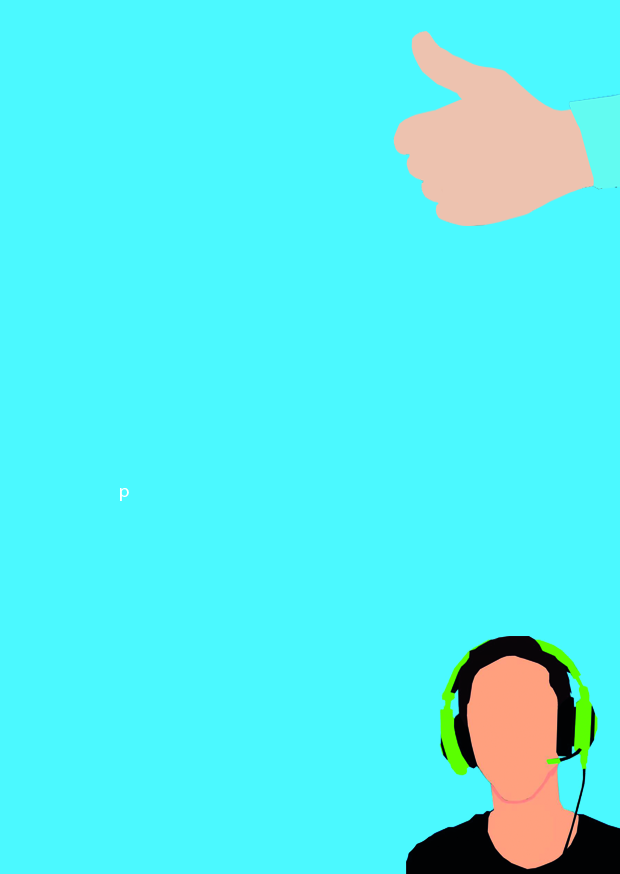
<style>
.page{position:relative;width:620px;height:874px;background:#4bf9ff}
.page>*{position:absolute;margin:0}
.t1{font:18.8px "MyriadPro-Regular";color:#ffffff}
</style>
<div class="page">
<p class="t1" style="left:120px;top:488px;width:9px;height:13px">p</p>
</div>
